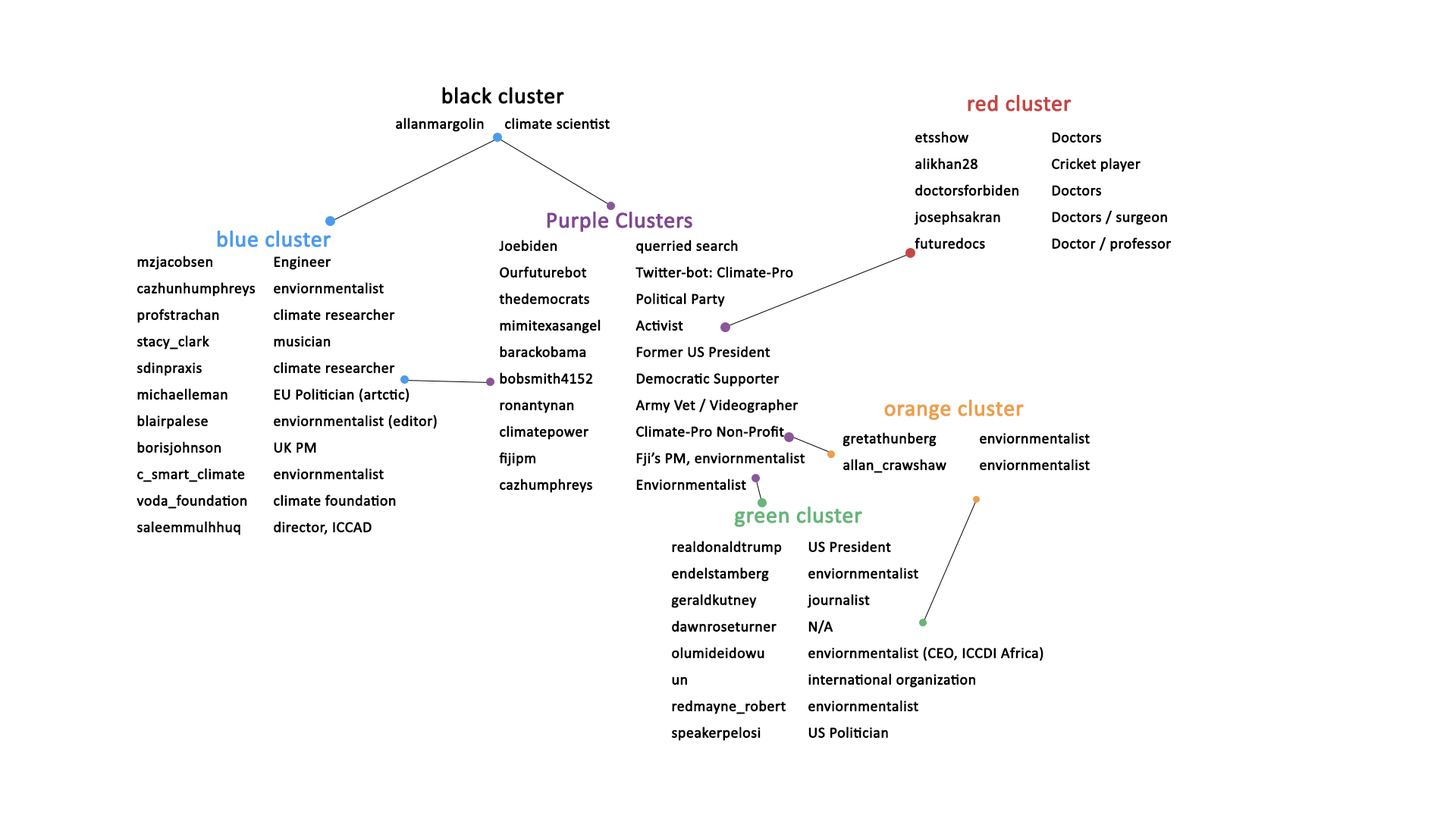
<style>
.page{position:relative;width:1456px;height:819px;background:#ffffff}
.page>*{position:absolute;margin:0}
.t1{font:22.7px "Calibri";color:#000000;font-weight:bold}
.t2{font:22.7px "Calibri";color:#c64646;font-weight:bold}
.t3{font:15.2px "Calibri";color:#000000;font-weight:bold}
.t4{font:15.2px/26.5px "Calibri";color:#000000;font-weight:bold}
.t5{font:22.7px "Calibri";color:#804892;font-weight:bold}
.t6{font:22.7px "Calibri";color:#4c9bec;font-weight:bold}
.t7{font:22.7px "Calibri";color:#ec9f4c;font-weight:bold}
.t8{font:22.7px "Calibri";color:#66b579;font-weight:bold}
</style>
<div class="page">
<p class="t1" style="left:442px;top:87px;width:122px;height:17px">black cluster</p>
<p class="t2" style="left:968px;top:95px;width:104px;height:16px">red cluster</p>
<p class="t3" style="left:396px;top:118px;width:214px;height:14px">allanmargolin climate scientist</p>
<p class="t4" style="left:914px;top:131px;width:258px;height:121px">etsshow    Doctors<br>alikhan28   Cricket player<br>doctorsforbiden  Doctors<br>josephsakran  Doctors / surgeon<br>futuredocs   Doctor / professor</p>
<p class="t5" style="left:547px;top:212px;width:145px;height:20px">Purple Clusters</p>
<p class="t6" style="left:217px;top:231px;width:114px;height:16px">blue cluster</p>
<p class="t4" style="left:499px;top:240px;width:306px;height:253px">Joebiden   querried search<br>Ourfuturebot  Twitter-bot: Climate-Pro<br>thedemocrats  Political Party<br>mimitexasangel  Activist<br>barackobama  Former US President<br>bobsmith4152  Democratic Supporter<br>ronantynan   Army Vet / Videographer<br>climatepower  Climate-Pro Non-Profit<br>fijipm    Fji’s PM, enviornmentalist<br>cazhumphreys  Enviornmentalist</p>
<p class="t4" style="left:136px;top:256px;width:301px;height:279px">mzjacobsen   Engineer<br>cazhunhumphreys enviornmentalist<br>profstrachan  climate researcher<br>stacy_clark   musician<br>sdinpraxis   climate researcher<br>michaelleman  EU Politician (artctic)<br>blairpalese   enviornmentalist (editor)<br>borisjohnson  UK PM<br>c_smart_climate  enviornmentalist<br>voda_foundation climate foundation<br>saleemmulhhuq  director, ICCAD</p>
<p class="t7" style="left:884px;top:400px;width:140px;height:20px">orange cluster</p>
<p class="t4" style="left:842px;top:432px;width:248px;height:41px">gretathunberg  enviornmentalist<br>allan_crawshaw  enviornmentalist</p>
<p class="t8" style="left:734px;top:507px;width:128px;height:20px">green cluster</p>
<p class="t4" style="left:671px;top:541px;width:372px;height:200px">realdonaldtrump US President<br>endelstamberg  enviornmentalist<br>geraldkutney  journalist<br>dawnroseturner  N/A<br>olumideidowu  enviornmentalist (CEO, ICCDI Africa)<br>un     international organization<br>redmayne_robert enviornmentalist<br>speakerpelosi  US Politician</p>
</div>
